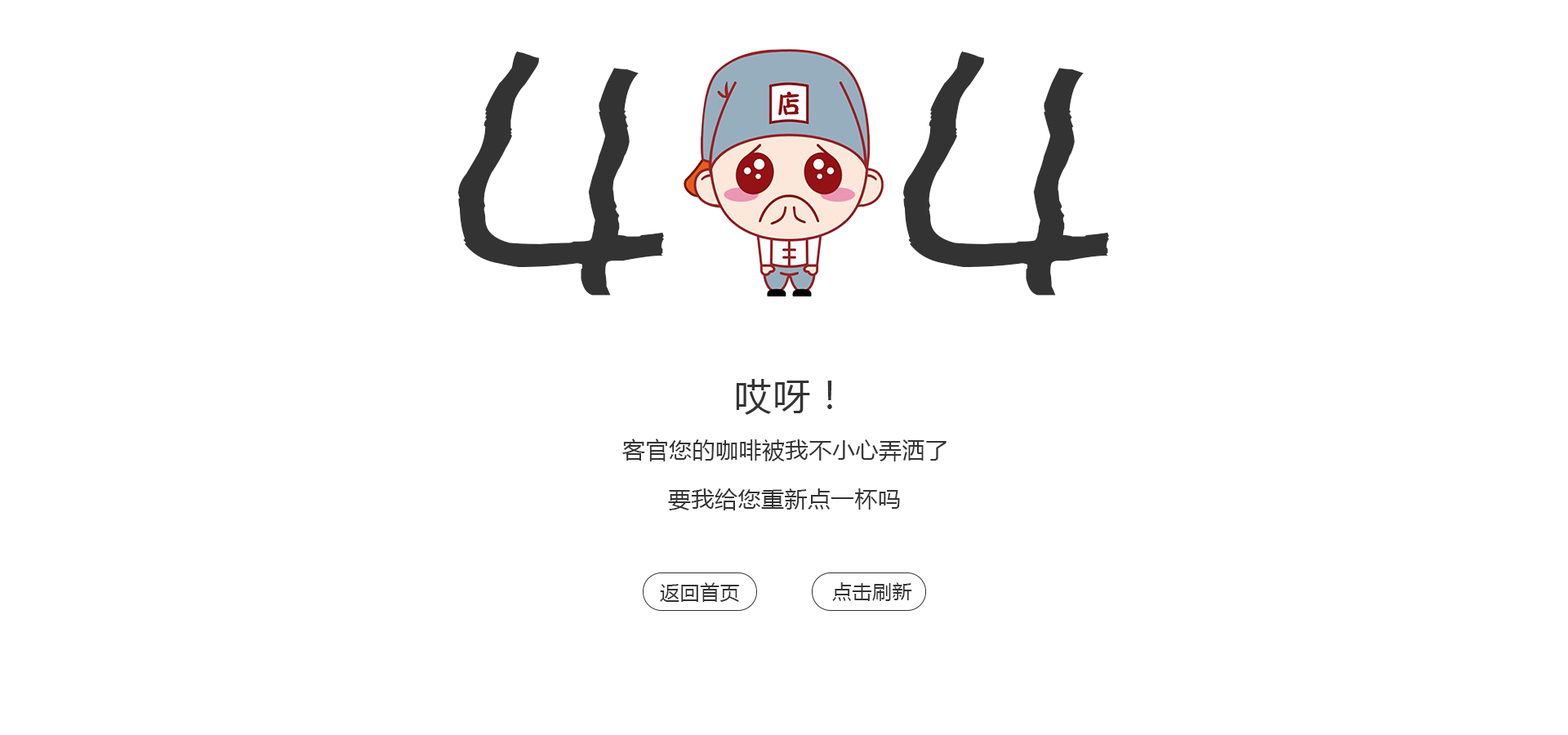
<style>
.page{position:relative;width:1568px;height:735px;background:#ffffff}
.page>*{position:absolute;margin:0}
.t1{font:326.7px "NiuniuEG-Bold-GB";letter-spacing:0.019em;color:#333333}
.t2{font:37.6px "MicrosoftYaHei";letter-spacing:0.019em;color:#333333}
.t3{font:22.9px "MicrosoftYaHei";letter-spacing:0.019em;color:#333333}
.t4{font:19.6px "MicrosoftYaHei";letter-spacing:0.019em;color:#333333}
</style>
<div class="page">
<p class="t1" style="left:458px;top:51px;width:206px;height:245px">4</p>
<p class="t1" style="left:903px;top:51px;width:206px;height:245px">4</p>
<p class="t2" style="left:736px;top:379px;width:96px;height:36px">哎呀！</p>
<p class="t3" style="left:622px;top:439px;width:325px;height:22px">客官您的咖啡被我不小心弄洒了</p>
<p class="t3" style="left:668px;top:488px;width:232px;height:22px">要我给您重新点一杯吗</p>
<p class="t4" style="left:660px;top:582px;width:79px;height:20px">返回首页</p>
<p class="t4" style="left:832px;top:582px;width:80px;height:19px">点击刷新</p>
</div>
